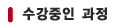
<style>
.page{position:relative;width:127px;height:28px;background:#ffffff}
.page>*{position:absolute;margin:0}
.t1{font:14.3px "YDIYGO150-KSCPC-EUC-H";letter-spacing:-0.01em;color:#2a2b29;font-weight:bold;scale:0.91 1}
</style>
<div class="page">
<p class="t1" style="left:22px;top:7px;width:85px;height:14px">수강중인 과정</p>
</div>
